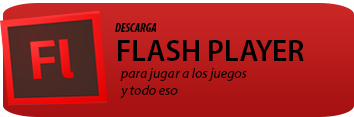
<style>
.page{position:relative;width:354px;height:117px}
.page>*{position:absolute;margin:0}
.t1{font:12px "MyriadPro-BoldCondIt";color:#000000}
.t2{font:30px "MyriadPro-Semibold";color:#000000}
.t3{font:14px "MyriadPro-It";color:#000000}
</style>
<div class="page">
<p class="t1" style="left:115px;top:23px;width:41px;height:9px">DESCARGA</p>
<p class="t2" style="left:118px;top:40px;width:186px;height:21px">FLASH PLAYER</p>
<p class="t3" style="left:120px;top:68px;width:127px;height:30px">para jugar a los juegos<br>y todo eso</p>
</div>
